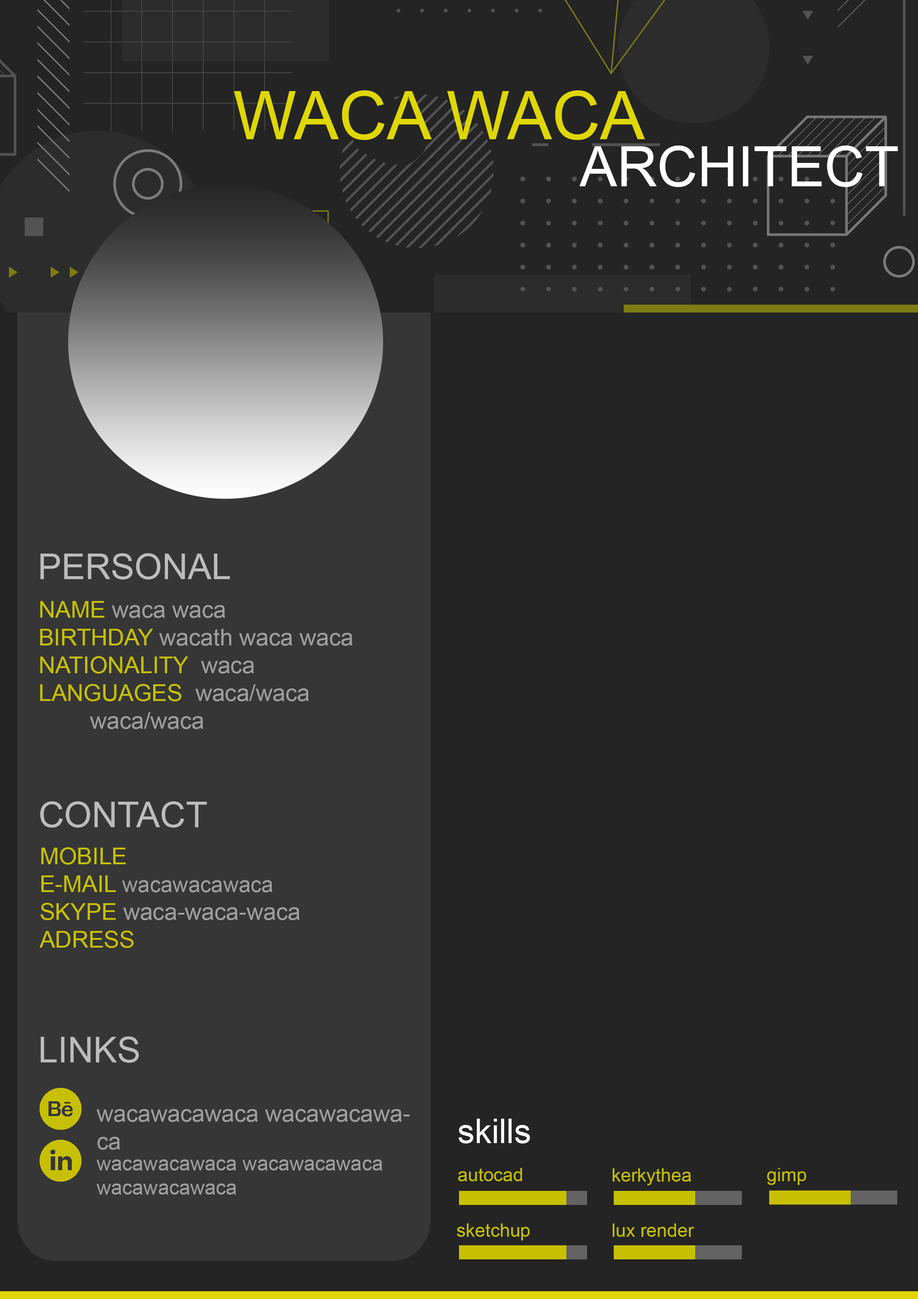
<style>
.page{position:relative;width:918px;height:1299px;background:#242424}
.page>*{position:absolute;margin:0}
.t1{font:67px "ArialMT";color:#dfd700}
.t2{font:55.8px "ArialMT";color:#ffffff}
.t3{font:35.5px "ArialMT";color:#bcbcbc}
.t4{font:23.1px "ArialMT";color:#9f9f9f}
.t5{font:27.8px "ArialMT";color:#b9b31f}
.t6{font:23.1px "ArialMT";color:#c7c002}
.t7{font:21.6px "ArialMT";color:#9f9f9f}
.t8{font:33.9px "ArialMT";color:#ffffff}
.t9{font:20.1px "ArialMT";color:#9f9f9f}
.t10{font:18.5px "ArialMT";color:#c7c002}
</style>
<div class="page">
<p class="t1" style="left:234px;top:90px;width:411px;height:50px">WACA WACA</p>
<p class="t2" style="left:579px;top:145px;width:319px;height:42px">ARCHITECT</p>
<p class="t3" style="left:40px;top:553px;width:190px;height:26px">PERSONAL</p>
<p class="t4" style="left:40px;top:601px;width:313px;height:128px;text-align:right"><span class="t5"><br><br></span><span class="t6">NAME </span>waca waca<br><span class="t6">BIRTHDAY </span>wacath waca waca  <br><span class="t6">NATIONALITY  </span>waca<br><span class="t6">LANGUAGES  </span>waca/waca<br>        waca/waca</p>
<p class="t3" style="left:40px;top:801px;width:167px;height:26px">CONTACT</p>
<p class="t6" style="left:39px;top:847px;width:261px;height:101px;text-align:right"><span class="t5"><br><br></span>MOBILE  <br>E-MAIL <span class="t7">wacawacawaca<br></span>SKYPE <span class="t4">waca-waca-waca<br></span>ADRESS</p>
<p class="t3" style="left:41px;top:1036px;width:98px;height:27px">LINKS</p>
<p class="t4" style="left:97px;top:1109px;width:313px;height:41px;text-align:right">wacawacawaca wacawacawaca</p>
<p class="t8" style="left:458px;top:1118px;width:72px;height:25px">skills</p>
<p class="t9" style="left:96px;top:1159px;width:286px;height:35px;text-align:right">wacawacawaca wacawacawaca wacawacawaca</p>
<p class="t10" style="left:458px;top:1168px;width:64px;height:13px">autocad</p>
<p class="t10" style="left:613px;top:1168px;width:78px;height:17px">kerkythea</p>
<p class="t10" style="left:767px;top:1168px;width:39px;height:17px">gimp</p>
<p class="t10" style="left:457px;top:1223px;width:73px;height:17px">sketchup</p>
<p class="t10" style="left:613px;top:1223px;width:82px;height:14px">lux render</p>
</div>
